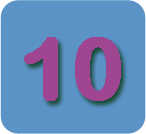
<style>
.page{position:relative;width:146px;height:134px;background:#5b93c7}
.page>*{position:absolute;margin:0}
.t1{font:86.1px "ArialRoundedMTBold";letter-spacing:-0.01em;color:#9f4591;font-weight:bold}
</style>
<div class="page">
<p class="t1" style="left:24px;top:37px;width:97px;height:64px">10</p>
</div>
